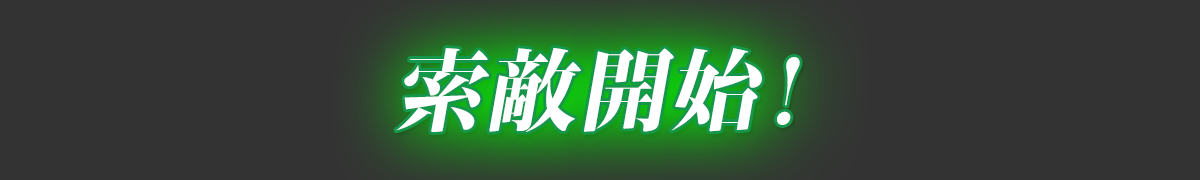
<style>
.page{position:relative;width:1200px;height:180px;background:#333333}
.page>*{position:absolute;margin:0}
.t1{font:90px "KochoStd-Heavy";letter-spacing:0.02em;color:#ffffff;font-style:italic}
</style>
<div class="page">
<p class="t1" style="left:396px;top:48px;width:404px;height:84px">索敵開始！</p>
</div>
